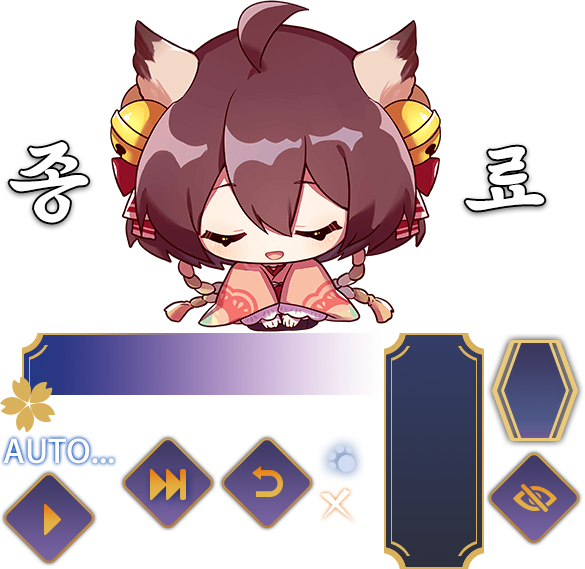
<style>
.page{position:relative;width:585px;height:569px;background:#ffffff}
.page>*{position:absolute;margin:0}
.t1{font:87.5px "SolmoeKimDaeGeonL";letter-spacing:-0.049em;color:#ffffff;font-weight:bold;scale:1.04 1}
</style>
<div class="page">
<p class="t1" style="left:9px;top:142px;width:80px;height:81px">종</p>
<p class="t1" style="left:465px;top:146px;width:80px;height:65px">료</p>
</div>
